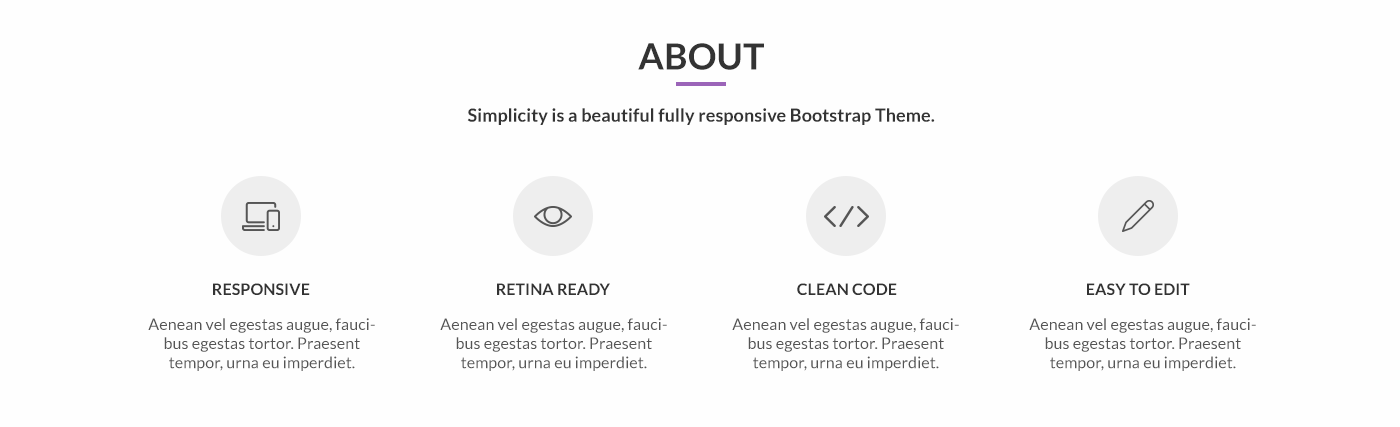
<style>
.page{position:relative;width:1400px;height:427px;background:#fefefe}
.page>*{position:absolute;margin:0}
.t1{font:36px "Lato-Bold";letter-spacing:0.005em;color:#333333}
.t2{font:18px "Lato-Bold";letter-spacing:0.005em;color:#333333}
.t3{font:16px "Lato-Bold";letter-spacing:0.005em;color:#333333}
.t4{font:16px "Lato-Regular";letter-spacing:0.005em;color:#555555}
</style>
<div class="page">
<p class="t1" style="left:638px;top:43px;width:126px;height:27px">ABOUT</p>
<p class="t2" style="left:467px;top:108px;width:468px;height:17px">Simplicity is a beautiful fully responsive Bootstrap Theme.</p>
<p class="t3" style="left:213px;top:283px;width:97px;height:12px">RESPONSIVE</p>
<p class="t3" style="left:497px;top:283px;width:113px;height:12px">RETINA READY</p>
<p class="t3" style="left:797px;top:283px;width:100px;height:12px">CLEAN CODE</p>
<p class="t3" style="left:1087px;top:283px;width:103px;height:12px">EASY TO EDIT</p>
<p class="t4" style="left:148px;top:318px;width:227px;height:53px;text-align:center">Aenean vel egestas augue, faucibus egestas tortor. Praesent tempor, urna eu imperdiet.</p>
<p class="t4" style="left:440px;top:318px;width:227px;height:53px;text-align:center">Aenean vel egestas augue, faucibus egestas tortor. Praesent tempor, urna eu imperdiet.</p>
<p class="t4" style="left:732px;top:318px;width:227px;height:53px;text-align:center">Aenean vel egestas augue, faucibus egestas tortor. Praesent tempor, urna eu imperdiet.</p>
<p class="t4" style="left:1029px;top:318px;width:227px;height:53px;text-align:center">Aenean vel egestas augue, faucibus egestas tortor. Praesent tempor, urna eu imperdiet.</p>
</div>
